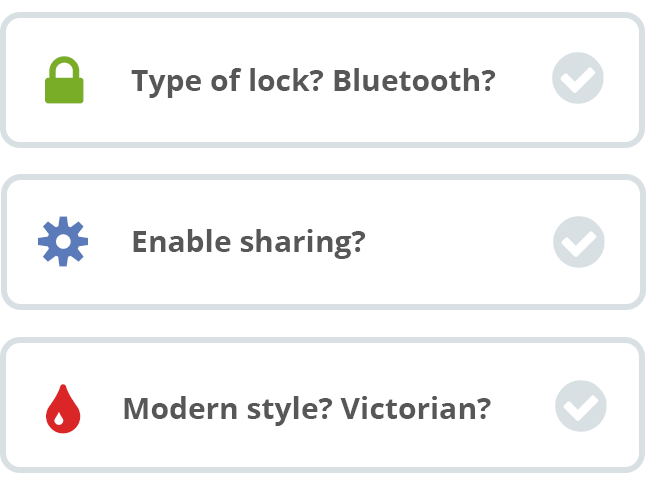
<style>
.page{position:relative;width:646px;height:484px;background:#ffffff}
.page>*{position:absolute;margin:0}
.t1{font:30px "OpenSans-Bold";color:#575757}
</style>
<div class="page">
<p class="t1" style="left:131px;top:68px;width:365px;height:30px">Type of lock? Bluetooth?</p>
<p class="t1" style="left:133px;top:229px;width:233px;height:30px">Enable sharing?</p>
<p class="t1" style="left:124px;top:396px;width:367px;height:30px">Modern style? Victorian?</p>
</div>
